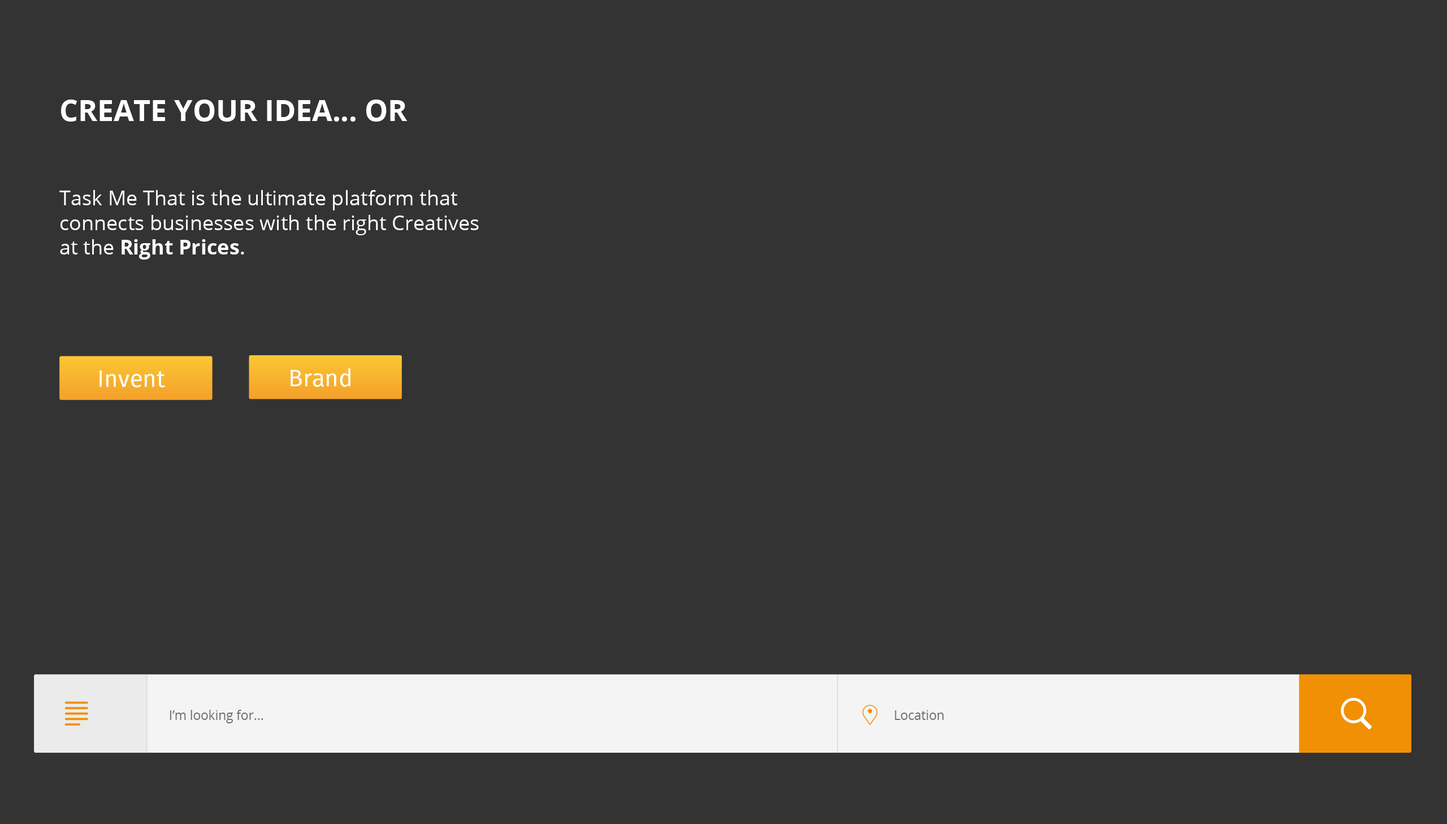
<style>
.page{position:relative;width:1447px;height:824px;background:#333333}
.page>*{position:absolute;margin:0}
.t1{font:29.2px "OpenSans-Bold";color:#ffffff}
.t2{font:20.4px "OpenSans";color:#ffffff}
.t3{font:20.4px "OpenSans-Bold";color:#ffffff}
.t4{font:20.4px "OpenSans-Semibold";color:#ffffff}
.t5{font:23.8px "FiraSans-Regular";letter-spacing:-0.004em;color:#ffffff}
.t6{font:12.7px "OpenSans";color:#70706e}
</style>
<div class="page">
<p class="t1" style="left:61px;top:100px;width:347px;height:22px">CREATE YOUR IDEA... OR</p>
<p class="t2" style="left:59px;top:190px;width:420px;height:70px">Task Me That is the ultimate platform that <br>connects businesses with the right Creatives <br>at the <span class="t3">Right Prices</span><span class="t4">.</span></p>
<p class="t5" style="left:100px;top:370px;width:65px;height:17px">Invent</p>
<p class="t5" style="left:291px;top:368px;width:60px;height:19px">Brand</p>
<p class="t6" style="left:170px;top:710px;width:93px;height:13px">I’m looking for...</p>
<p class="t6" style="left:895px;top:710px;width:49px;height:10px">Location</p>
</div>
